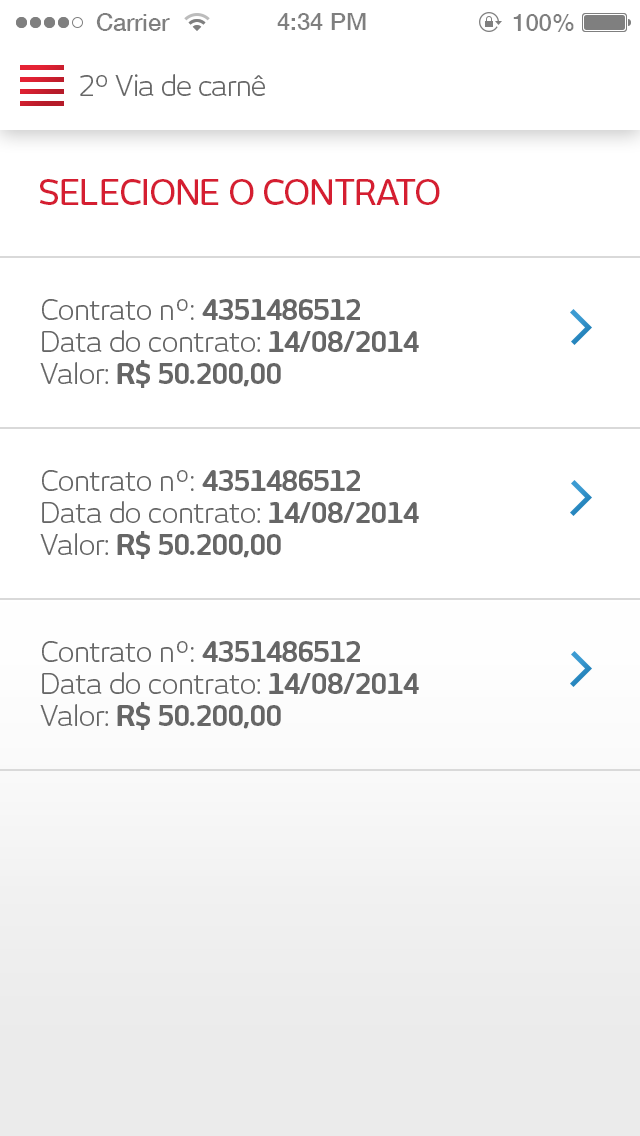
<style>
.page{position:relative;width:640px;height:1136px;background:#ffffff}
.page>*{position:absolute;margin:0}
.t1{font:24px "HelveticaNeue-Medium";color:#7f7f7f}
.t2{font:28px "NewJuneBook";letter-spacing:-0.025em;color:#666666}
.t3{font:34px "NewJuneMedium";letter-spacing:-0.025em;color:#d51e31;text-transform:uppercase}
.t4{font:28px/32px "NewJuneBook";letter-spacing:-0.02em;color:#666666}
.t5{font:28px/32px "NewJuneBold";letter-spacing:-0.02em;color:#666666}
</style>
<div class="page">
<p class="t1" style="left:96px;top:13px;width:74px;height:18px">Carrier</p>
<p class="t1" style="left:277px;top:13px;width:89px;height:17px">4:34 PM</p>
<p class="t1" style="left:513px;top:14px;width:61px;height:18px">100%</p>
<p class="t2" style="left:80px;top:74px;width:185px;height:22px">2º Via de carnê</p>
<p class="t3" style="left:40px;top:179px;width:400px;height:26px">Selecione o Contrato</p>
<p class="t4" style="left:40px;top:299px;width:379px;height:89px">Contrato nº:<span class="t5"> 4351486512<br></span>Data do contrato:<span class="t5"> 14/08/2014<br></span>Valor:<span class="t5"> R$ 50.200,00</span></p>
<p class="t4" style="left:40px;top:470px;width:379px;height:89px">Contrato nº:<span class="t5"> 4351486512<br></span>Data do contrato:<span class="t5"> 14/08/2014<br></span>Valor:<span class="t5"> R$ 50.200,00</span></p>
<p class="t4" style="left:40px;top:641px;width:379px;height:89px">Contrato nº:<span class="t5"> 4351486512<br></span>Data do contrato:<span class="t5"> 14/08/2014<br></span>Valor:<span class="t5"> R$ 50.200,00</span></p>
</div>
